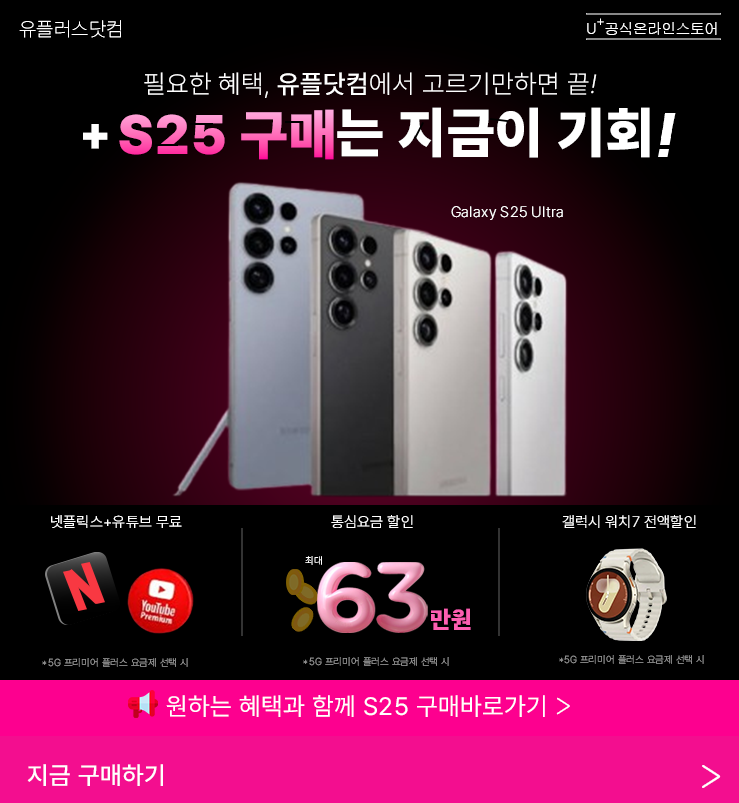
<style>
.page{position:relative;width:739px;height:803px;background:#000000}
.page>*{position:absolute;margin:0}
.t1{font:20px "Pretendard-Thin";letter-spacing:0.01em;color:#ffffff}
.t2{font:15px "Gulim";letter-spacing:-0.05em;color:#ffffff}
.t3{font:15px "Pretendard-Thin";letter-spacing:-0.05em;color:#ffffff}
.t4{font:26px "Pretendard-ExtraLight";letter-spacing:0.02em;color:#ffffff}
.t5{font:26px "Pretendard-Medium";letter-spacing:0.02em;color:#ffffff}
.t6{font:26px "Pretendard-ExtraLight";letter-spacing:0.02em;color:#ffffff;font-style:italic}
.t7{font:55px "Pretendard-Black";letter-spacing:0.02em}
.t8{font:55px "Pretendard-Black";letter-spacing:0.02em;color:#ffffff}
.t9{font:55px "Pretendard-Black";letter-spacing:0.02em;color:#ffffff;font-style:italic}
.t10{font:47.9px "Pretendard-Black";letter-spacing:0.02em;color:#ffffff}
.t11{font:15px "Pretendard-ExtraLight";letter-spacing:0.02em;color:#ffffff}
.t12{font:10px "Pretendard-Thin";letter-spacing:0.02em;color:#ffffff}
.t13{font:23.9px "Pretendard-Black";letter-spacing:0.02em;color:#fd5eb1}
.t14{font:10px "Pretendard-ExtraLight";letter-spacing:0.02em;color:#8d8d8d}
.t15{font:25px "Pretendard-Regular";letter-spacing:0.02em;color:#ffffff}
.t16{font:25px "Gulim";letter-spacing:0.02em;color:#ffffff}
.t17{font:25px "Pretendard-Medium";letter-spacing:0.02em;color:#ffffff}
.t18{font:35px "Gulim";letter-spacing:0.02em;color:#ffffff}
</style>
<div class="page">
<p class="t1" style="left:19px;top:20px;width:102px;height:18px">유플러스닷컴</p>
<p class="t2" style="left:587px;top:22px;width:130px;height:13px">U  공식온라인스토어</p>
<p class="t3" style="left:597px;top:18px;width:7px;height:7px">+</p>
<p class="t4" style="left:144px;top:72px;width:453px;height:26px">필요한 혜택, <span class="t5">유플닷컴</span>에서 고르기만하면 끝<span class="t6">!</span></p>
<p class="t7" style="left:119px;top:109px;width:215px;height:51px">S25 구매</p>
<p class="t8" style="left:337px;top:107px;width:339px;height:51px">는 지금이 기회<span class="t9">!</span></p>
<p class="t10" style="left:83px;top:124px;width:25px;height:25px">+</p>
<p class="t11" style="left:451px;top:206px;width:112px;height:14px">Galaxy S25 Ultra</p>
<p class="t11" style="left:51px;top:515px;width:131px;height:13px">넷플릭스+유튜브 무료</p>
<p class="t11" style="left:331px;top:515px;width:82px;height:13px">통심요금 할인</p>
<p class="t11" style="left:562px;top:515px;width:134px;height:13px">갤럭시 워치7 전액할인</p>
<p class="t12" style="left:305px;top:556px;width:17px;height:9px">최대</p>
<p class="t13" style="left:431px;top:608px;width:40px;height:22px">만원</p>
<p class="t14" style="left:42px;top:660px;width:5px;height:5px">*</p>
<p class="t14" style="left:48px;top:658px;width:140px;height:9px">5G 프리미어 플러스 요금제 선택 시</p>
<p class="t14" style="left:303px;top:659px;width:5px;height:5px">*</p>
<p class="t14" style="left:309px;top:657px;width:140px;height:9px">5G 프리미어 플러스 요금제 선택 시</p>
<p class="t14" style="left:559px;top:657px;width:5px;height:5px">*</p>
<p class="t14" style="left:564px;top:655px;width:140px;height:9px">5G 프리미어 플러스 요금제 선택 시</p>
<p class="t15" style="left:166px;top:695px;width:404px;height:22px">원하는 혜택과 함께 S25 구매바로가기 <span class="t16">&gt;</span></p>
<p class="t17" style="left:27px;top:764px;width:136px;height:22px">지금 구매하기</p>
<p class="t18" style="left:702px;top:765px;width:19px;height:23px">&gt;</p>
</div>
